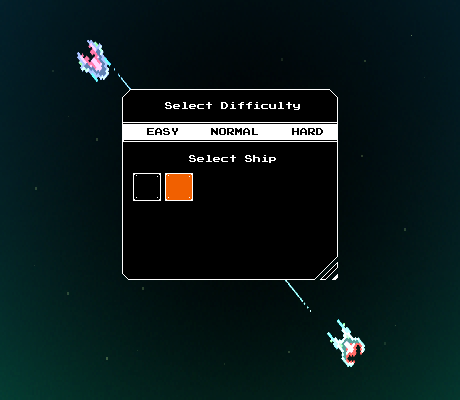
<style>
.page{position:relative;width:460px;height:400px;background:#000000}
.page>*{position:absolute;margin:0}
.t1{font:8px "PressStart2P";color:#ffffff}
.t2{font:8px "PressStart2P";color:#000000}
</style>
<div class="page">
<p class="t1" style="left:165px;top:102px;width:135px;height:8px">Select Difficulty</p>
<p class="t2" style="left:147px;top:128px;width:31px;height:7px">EASY</p>
<p class="t2" style="left:211px;top:128px;width:47px;height:7px">NORMAL</p>
<p class="t2" style="left:292px;top:128px;width:31px;height:7px">HARD</p>
<p class="t1" style="left:189px;top:155px;width:87px;height:8px">Select Ship</p>
</div>
